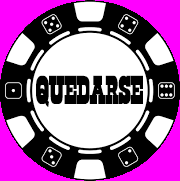
<style>
.page{position:relative;width:180px;height:181px;background:#ffffff}
.page>*{position:absolute;margin:0}
.t1{font:37.9px "Cowboys2.0";letter-spacing:-0.025em;color:#000000;scale:0.53 1}
</style>
<div class="page">
<p class="t1" style="left:36px;top:75px;width:107px;height:32px">Quedarse</p>
</div>
